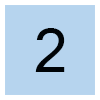
<style>
.page{position:relative;width:100px;height:100px;background:#b6d4ee}
.page>*{position:absolute;margin:0}
.t1{font:60px "MicrosoftSansSerif";color:#000407}
</style>
<div class="page">
<p class="t1" style="left:35px;top:28px;width:30px;height:44px">2</p>
</div>
